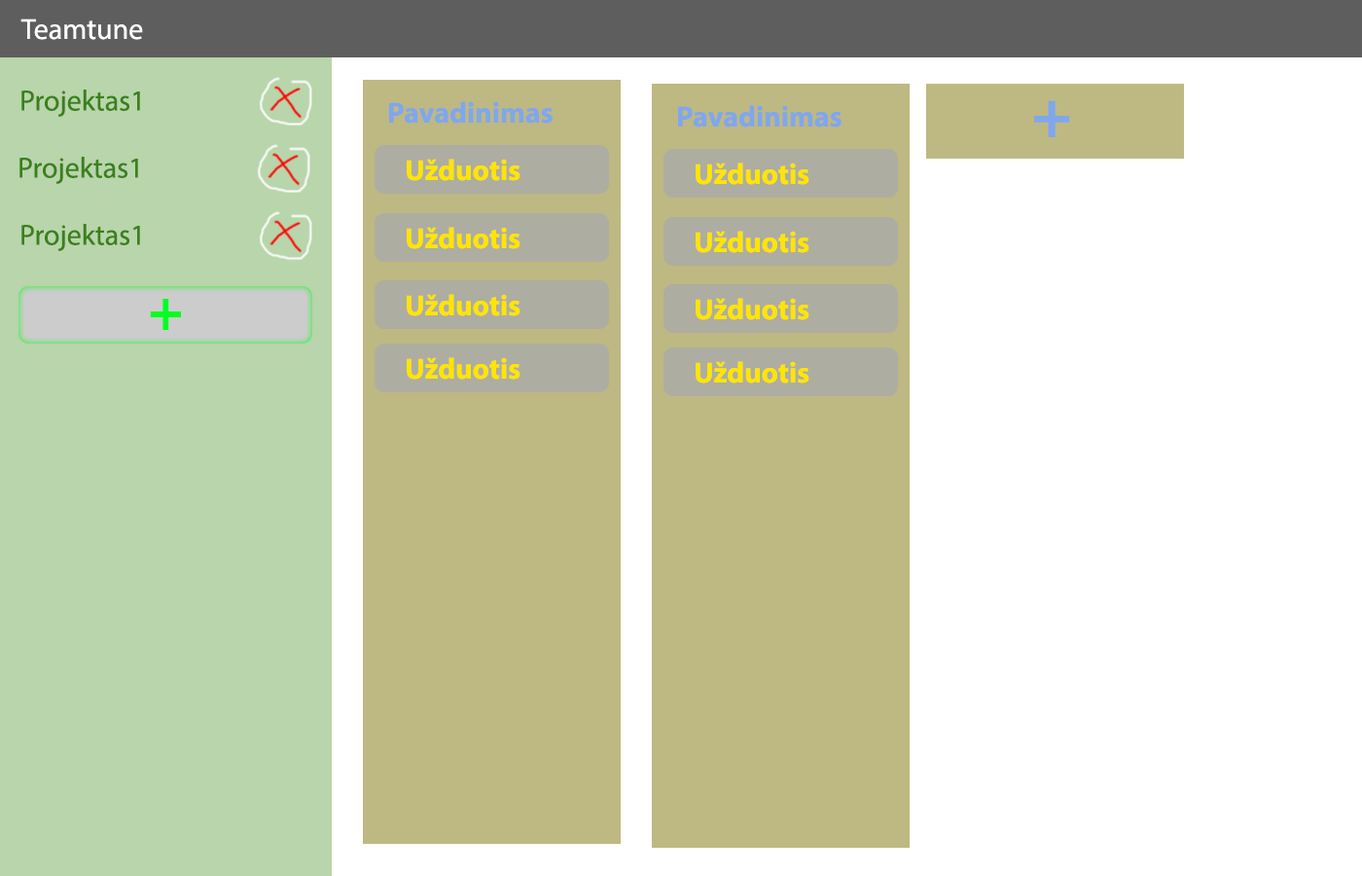
<style>
.page{position:relative;width:1362px;height:876px;background:#ffffff}
.page>*{position:absolute;margin:0}
.t1{font:29.2px "MyriadPro-Regular";color:#ffffff}
.t2{font:29.2px "MyriadPro-Regular";color:#3a801b}
.t3{font:29.2px "MyriadPro-Bold";color:#80a7ec}
.t4{font:68.1px "MyriadPro-Bold";color:#80a7ec}
.t5{font:29.2px "MyriadPro-Bold";color:#ffe500}
.t6{font:58.4px "MyriadPro-Bold";color:#00ff22}
</style>
<div class="page">
<p class="t1" style="left:20px;top:18px;width:123px;height:22px">Teamtune</p>
<p class="t2" style="left:21px;top:89px;width:119px;height:28px">Projektas1</p>
<p class="t3" style="left:389px;top:101px;width:164px;height:23px">Pavadinimas</p>
<p class="t4" style="left:1034px;top:100px;width:36px;height:37px">+</p>
<p class="t3" style="left:678px;top:105px;width:163px;height:22px">Pavadinimas</p>
<p class="t2" style="left:19px;top:157px;width:119px;height:27px">Projektas1</p>
<p class="t5" style="left:407px;top:159px;width:113px;height:22px">Užduotis</p>
<p class="t5" style="left:696px;top:162px;width:113px;height:23px">Užduotis</p>
<p class="t2" style="left:21px;top:224px;width:119px;height:27px">Projektas1</p>
<p class="t5" style="left:407px;top:227px;width:113px;height:22px">Užduotis</p>
<p class="t5" style="left:696px;top:231px;width:113px;height:22px">Užduotis</p>
<p class="t5" style="left:407px;top:294px;width:113px;height:22px">Užduotis</p>
<p class="t6" style="left:150px;top:299px;width:31px;height:31px">+</p>
<p class="t5" style="left:696px;top:298px;width:113px;height:22px">Užduotis</p>
<p class="t5" style="left:407px;top:357px;width:113px;height:22px">Užduotis</p>
<p class="t5" style="left:696px;top:361px;width:113px;height:22px">Užduotis</p>
</div>
